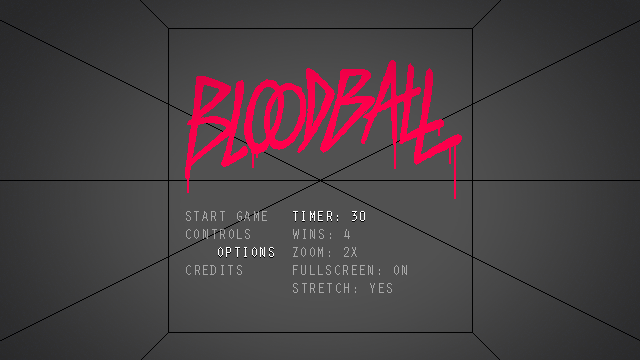
<style>
.page{position:relative;width:640px;height:360px}
.page>*{position:absolute;margin:0}
.t1{font:14px "OratorStd";color:#a8a8a8;text-transform:uppercase}
.t2{font:14px "OratorStd";color:#ffffff;text-transform:uppercase}
.t3{font:14px "OratorStd";color:#a6a6a6;text-transform:uppercase}
</style>
<div class="page">
<p class="t1" style="left:186px;top:211px;width:81px;height:10px">START GAME</p>
<p class="t2" style="left:293px;top:211px;width:72px;height:10px">timer: 30</p>
<p class="t1" style="left:186px;top:229px;width:64px;height:10px">controls</p>
<p class="t1" style="left:293px;top:229px;width:57px;height:10px">wins: 4</p>
<p class="t2" style="left:218px;top:247px;width:56px;height:10px">options</p>
<p class="t1" style="left:293px;top:247px;width:64px;height:10px">zoom: 2x</p>
<p class="t3" style="left:186px;top:265px;width:56px;height:10px">credits</p>
<p class="t1" style="left:293px;top:265px;width:114px;height:10px">fullscreen: on</p>
<p class="t1" style="left:293px;top:283px;width:99px;height:10px">stretch: yes</p>
</div>
